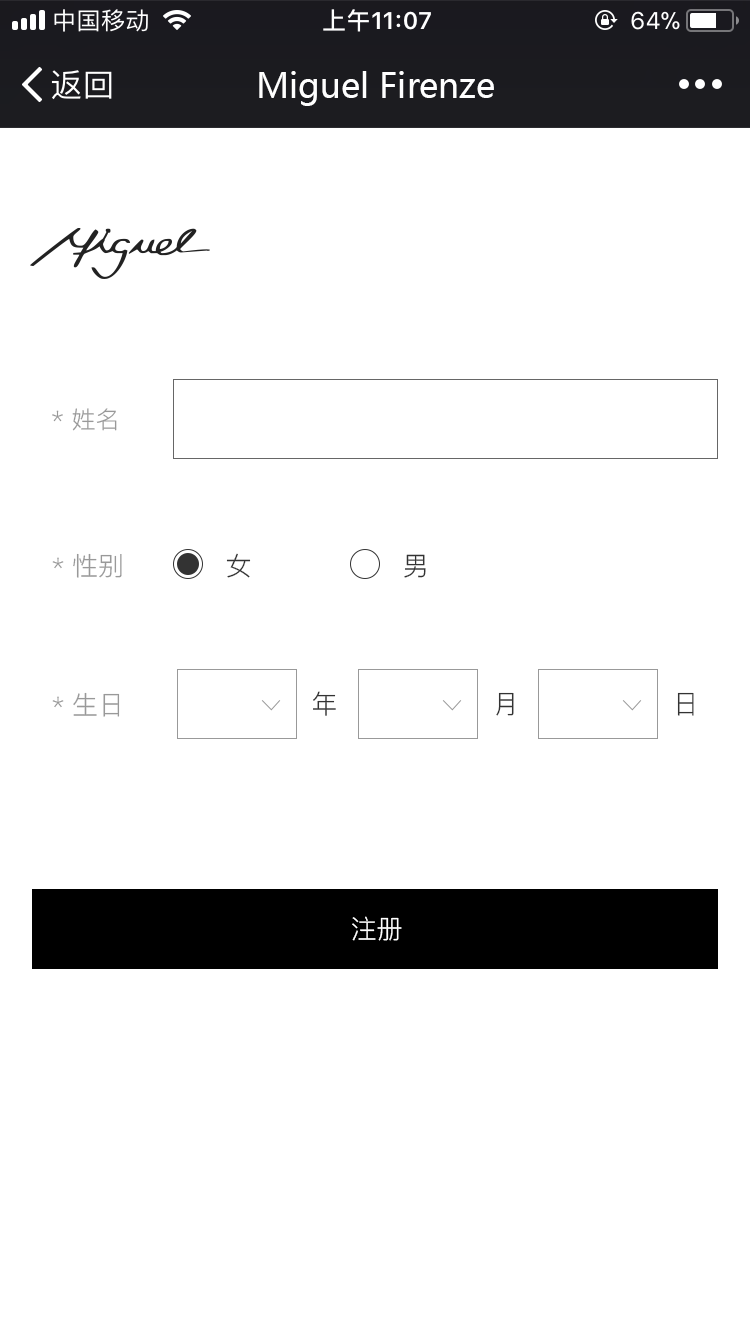
<style>
.page{position:relative;width:750px;height:1334px;background:#ffffff}
.page>*{position:absolute;margin:0}
.t1{font:34px "MicrosoftYaHei";color:#ffffff}
.t2{font:24px "PingFang-SC-Regular";color:#999999}
.t3{font:26px "PingFang-SC-Regular";color:#999999}
.t4{font:26px "PingFang-SC-Regular";color:#333333}
.t5{font:26px "PingFang-SC-Regular";color:#ffffff}
</style>
<div class="page">
<p class="t1" style="left:259px;top:71px;width:235px;height:35px">Miguel Firenze</p>
<p class="t2" style="left:52px;top:408px;width:65px;height:23px">* 姓名</p>
<p class="t3" style="left:52px;top:553px;width:70px;height:25px"><span class="t2">* </span>性别</p>
<p class="t4" style="left:226px;top:553px;width:25px;height:25px">女</p>
<p class="t4" style="left:404px;top:554px;width:22px;height:24px">男</p>
<p class="t3" style="left:52px;top:692px;width:68px;height:25px"><span class="t2">* </span>生日</p>
<p class="t4" style="left:313px;top:691px;width:23px;height:25px">年</p>
<p class="t4" style="left:496px;top:692px;width:18px;height:24px">月</p>
<p class="t4" style="left:677px;top:692px;width:17px;height:24px">日</p>
<p class="t5" style="left:352px;top:916px;width:50px;height:25px">注册</p>
</div>
